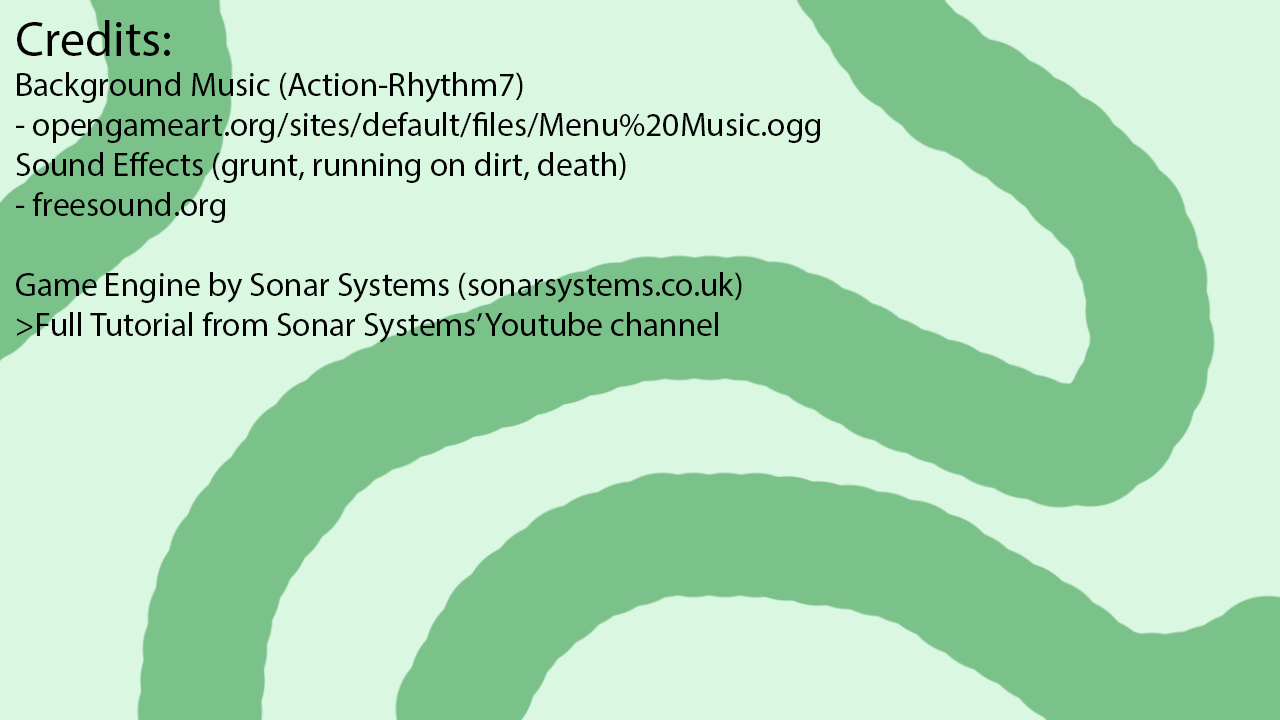
<style>
.page{position:relative;width:1280px;height:720px;background:#daf7e1}
.page>*{position:absolute;margin:0}
.t1{font:33.3px "MyriadPro-Regular";color:#010101}
.t2{font:12px "MyriadPro-Regular";color:#010101}
</style>
<div class="page">
<p class="t1" style="left:16px;top:20px;width:804px;height:323px"><span class="t2">Credits:<br></span>Background Music (Action-Rhythm7) <br>- opengameart.org/sites/default/files/Menu%20Music.ogg<br>Sound Effects (grunt, running on dirt, death)<br>- freesound.org<br><br>Game Engine by Sonar Systems (sonarsystems.co.uk)<br>&gt;Full Tutorial from Sonar Systems’ Youtube channel</p>
</div>
